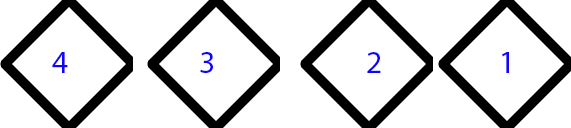
<style>
.page{position:relative;width:571px;height:128px;background:#ffffff}
.page>*{position:absolute;margin:0}
.t1{font:32px "MyriadPro-Regular";color:#0f02ff}
</style>
<div class="page">
<p class="t1" style="left:52px;top:52px;width:16px;height:21px">4</p>
<p class="t1" style="left:200px;top:52px;width:13px;height:21px">3</p>
<p class="t1" style="left:367px;top:52px;width:14px;height:21px">2</p>
<p class="t1" style="left:502px;top:52px;width:7px;height:21px">1</p>
</div>
